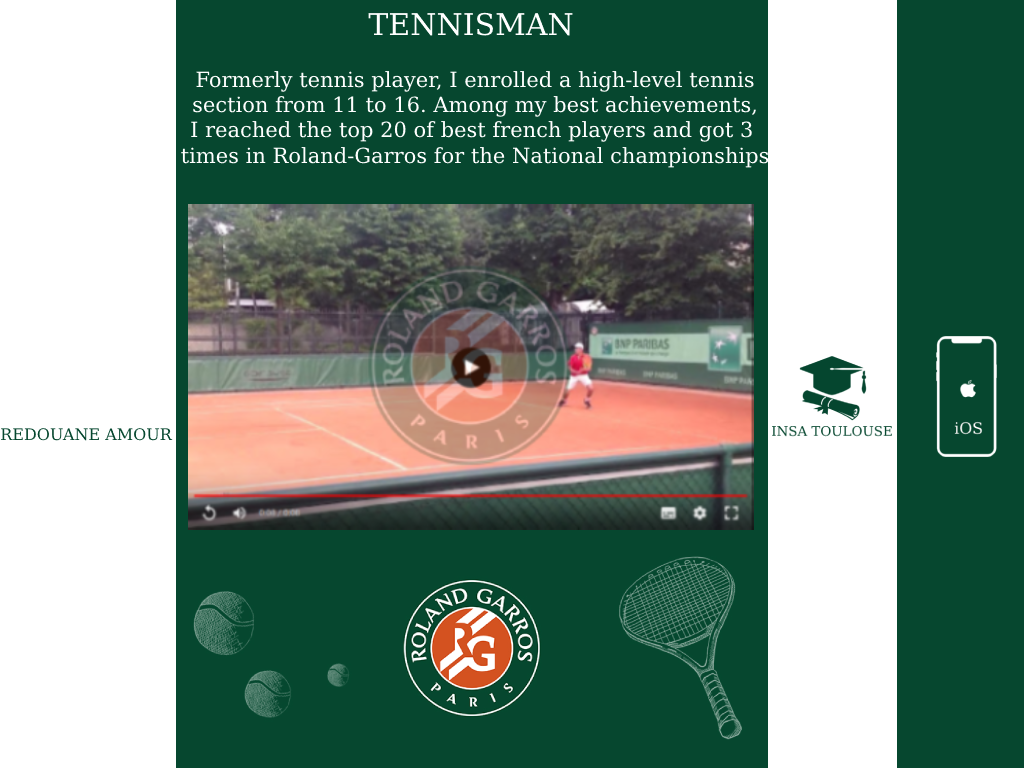
<style>
.page{position:relative;width:1024px;height:768px;background:#06472f}
.page>*{position:absolute;margin:0}
.t1{font:30px "DejaVuSerif";color:#ffffff}
.t2{font:21px "DejaVuSerif";color:#ffffff}
.t3{font:16px "DejaVuSerif";color:#06472f}
</style>
<div class="page">
<p class="t1" style="left:368px;top:12px;width:205px;height:24px">TENNISMAN</p>
<p class="t2" style="left:181px;top:71px;width:588px;height:97px;text-align:center">Formerly tennis player, I enrolled a high-level tennis<br>section from 11 to 16. Among my best achievements,<br>I reached the top 20 of best french players and got 3 <br>times in Roland-Garros for the National championships</p>
<p class="t3" style="left:1px;top:428px;width:172px;height:13px">REDOUANE AMOUR</p>
</div>
